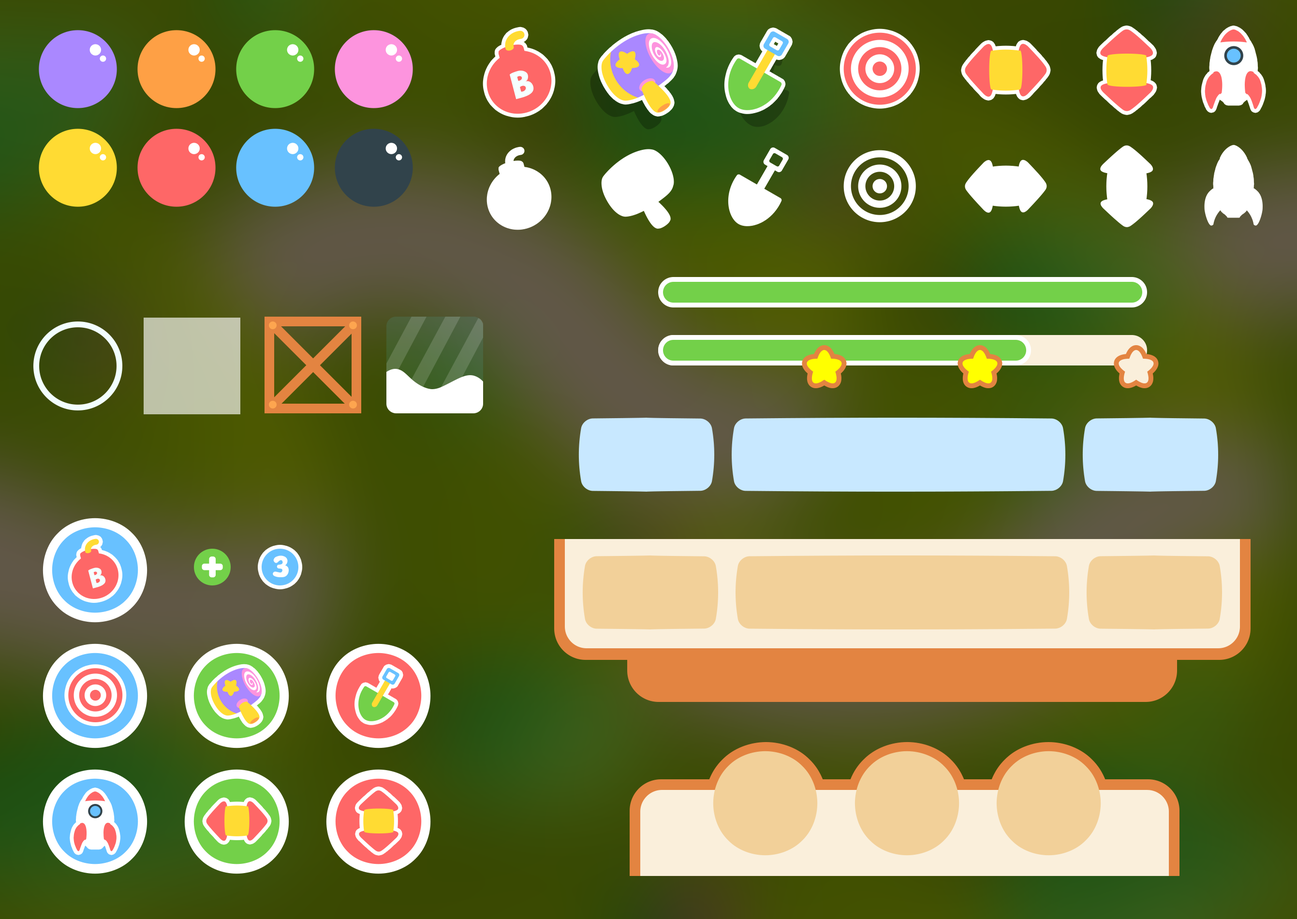
<style>
.page{position:relative;width:1297px;height:919px}
.page>*{position:absolute;margin:0}
.t1{font:29px "Eazy-Chat";color:#ffffff}
</style>
<div class="page">
<p class="t1" style="left:273px;top:556px;width:16px;height:21px">3</p>
</div>
